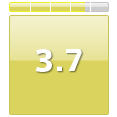
<style>
.page{position:relative;width:117px;height:117px;background:#dad35d}
.page>*{position:absolute;margin:0}
.t1{font:36px "Colaborate-Bold";color:#ffffff;text-transform:uppercase}
</style>
<div class="page">
<p class="t1" style="left:35px;top:49px;width:47px;height:23px">3.7</p>
</div>
